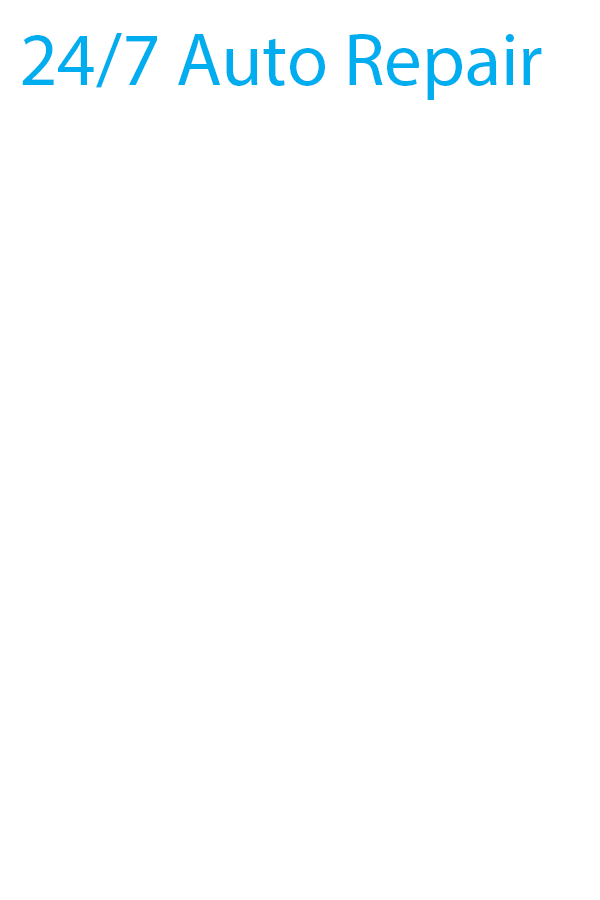
<style>
.page{position:relative;width:600px;height:900px;background:#ffffff}
.page>*{position:absolute;margin:0}
.t1{font:75px "MyriadPro-Regular";color:#00aeef}
</style>
<div class="page">
<p class="t1" style="left:22px;top:33px;width:520px;height:67px">24/7 Auto Repair</p>
</div>
